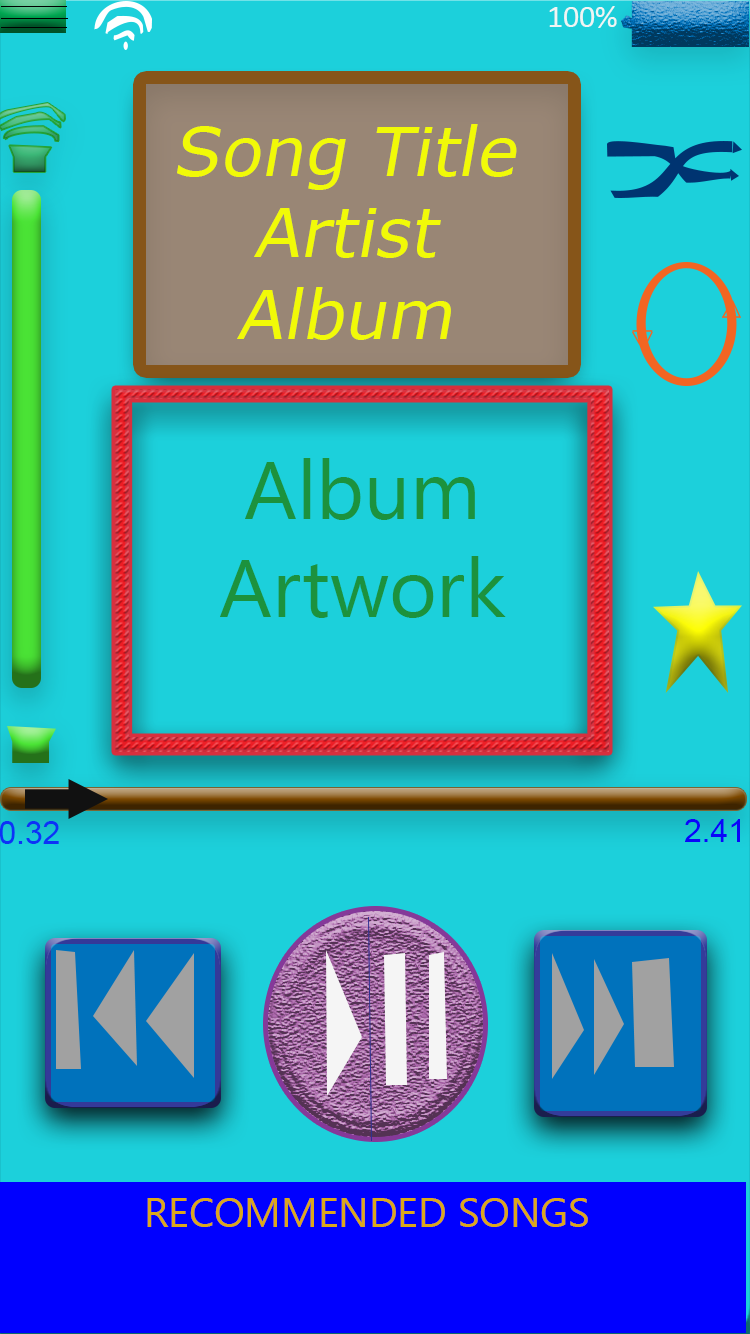
<style>
.page{position:relative;width:750px;height:1334px;background:#1cd0db}
.page>*{position:absolute;margin:0}
.t1{font:31.7px "Calibri";color:#eff5f4}
.t2{font:67.9px "Verdana";color:#f1fa07;font-style:italic}
.t3{font:81.5px "SegoeUI";color:#1c923d}
.t4{font:31.7px "ArialMT";color:#0d33f7}
.t5{font:31.7px "ArialMT";color:#0b05fa}
.t6{font:40.8px "SegoeUI";color:#dba71c;text-transform:uppercase}
</style>
<div class="page">
<p class="t1" style="left:549px;top:6px;width:68px;height:22px">100%</p>
<p class="t2" style="left:177px;top:124px;width:340px;height:216px;text-align:center">Song Title<br>Artist<br>Album</p>
<p class="t3" style="left:220px;top:458px;width:286px;height:160px;text-align:center">Album Artwork</p>
<p class="t4" style="left:0px;top:821px;width:59px;height:23px">0.32</p>
<p class="t5" style="left:685px;top:819px;width:55px;height:23px">2.41</p>
<p class="t6" style="left:147px;top:1198px;width:441px;height:29px">Recommended Songs</p>
</div>
